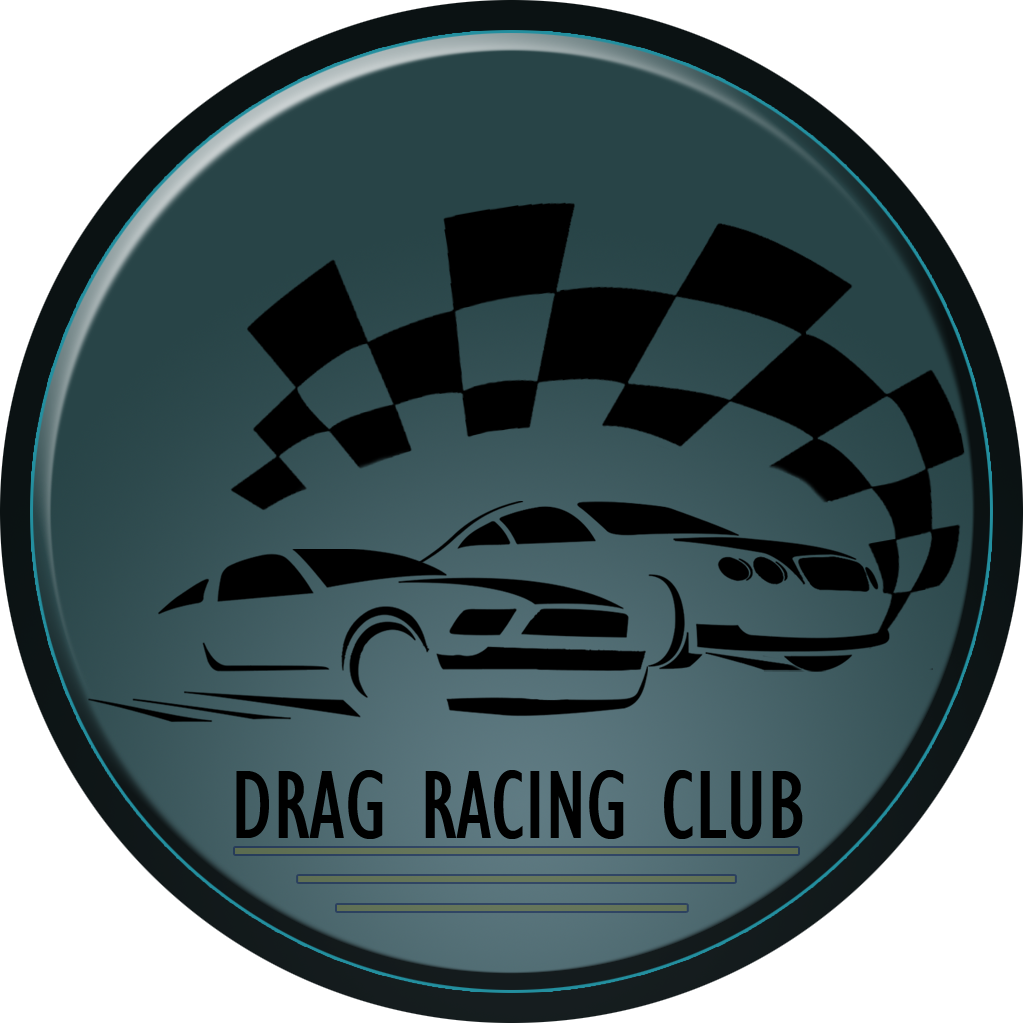
<style>
.page{position:relative;width:1024px;height:1024px;background:#ffffff}
.page>*{position:absolute;margin:0}
.t1{font:100px "GillSansMT-Condensed";color:#000000}
</style>
<div class="page">
<p class="t1" style="left:236px;top:770px;width:567px;height:69px">DRAG RACING CLUB</p>
</div>
